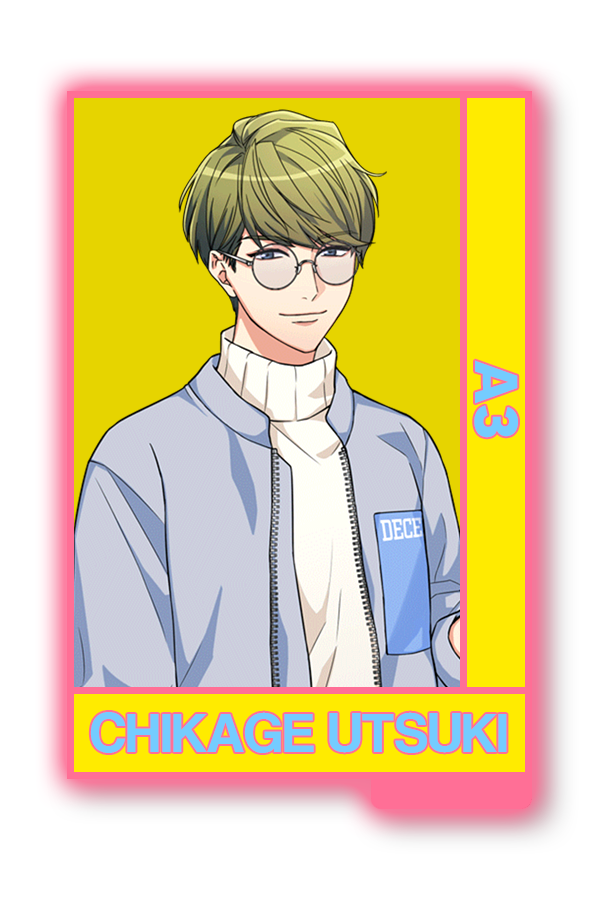
<style>
.page{position:relative;width:600px;height:900px;background:#ffffff}
.page>*{position:absolute;margin:0}
.t1{font:60.5px "MADETOMMY-Bold";color:#74ccff}
.t2{font:58.5px "CoolveticaRg-Regular";color:#74ccff}
</style>
<div class="page">
<p class="t1" style="left:474px;top:360px;width:44px;height:78px;rotate:90deg">A3</p>
<p class="t2" style="left:90px;top:712px;width:417px;height:41px">CHIKAGE UTSUKI</p>
</div>
